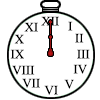
<style>
.page{position:relative;width:100px;height:100px;background:#ffffff}
.page>*{position:absolute;margin:0}
.t1{font:16px "Aparajita";color:#000000}
</style>
<div class="page">
<p class="t1" style="left:41px;top:16px;width:18px;height:10px">XII</p>
<p class="t1" style="left:24px;top:22px;width:14px;height:10px">XI</p>
<p class="t1" style="left:68px;top:21px;width:5px;height:10px">I</p>
<p class="t1" style="left:14px;top:34px;width:10px;height:10px">X</p>
<p class="t1" style="left:75px;top:33px;width:9px;height:10px">II</p>
<p class="t1" style="left:10px;top:49px;width:14px;height:10px">IX</p>
<p class="t1" style="left:77px;top:49px;width:13px;height:10px">III</p>
<p class="t1" style="left:12px;top:65px;width:23px;height:10px">VIII</p>
<p class="t1" style="left:73px;top:64px;width:14px;height:10px">IV</p>
<p class="t1" style="left:22px;top:78px;width:18px;height:10px">VII</p>
<p class="t1" style="left:44px;top:85px;width:14px;height:10px">VI</p>
<p class="t1" style="left:64px;top:79px;width:10px;height:10px">V</p>
</div>
